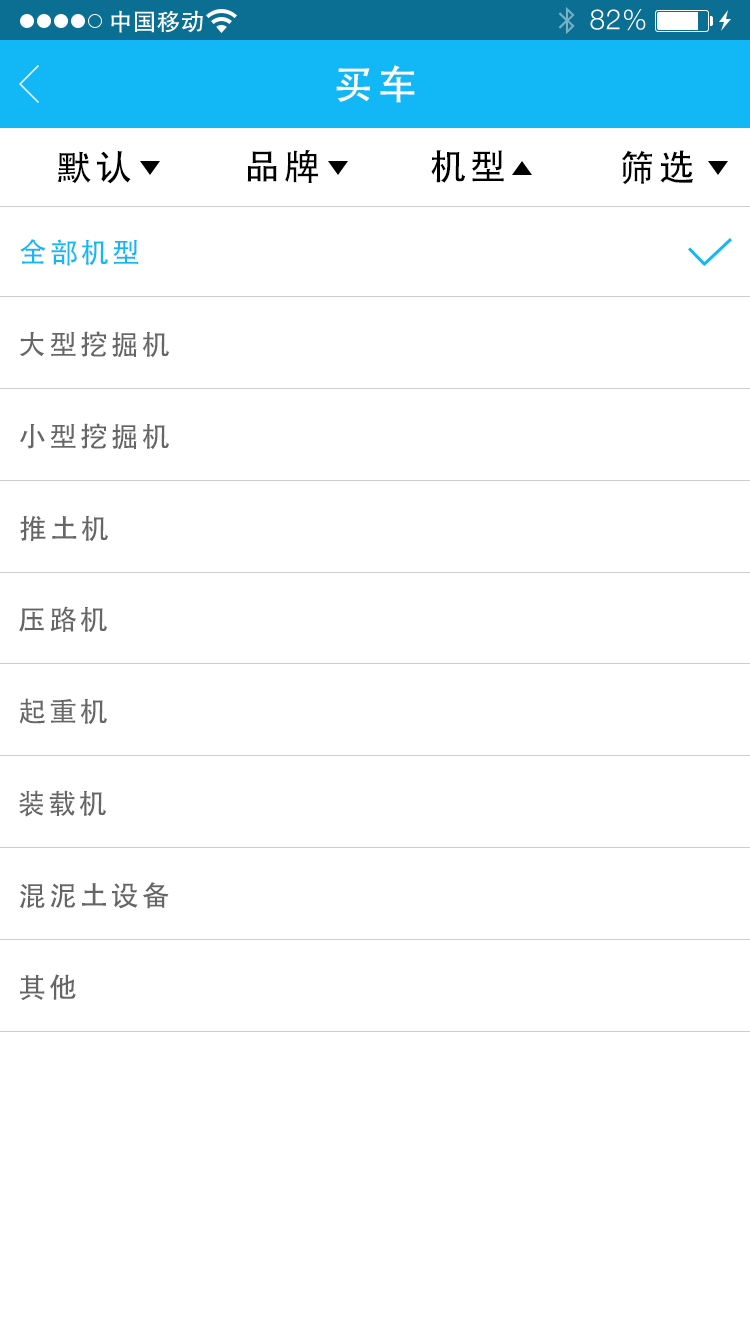
<style>
.page{position:relative;width:750px;height:1334px;background:#ffffff}
.page>*{position:absolute;margin:0}
.t1{font:40px "AdobeHeitiStd-Regular";letter-spacing:0.104em;color:#ffffff}
.t2{font:36px "AdobeHeitiStd-Regular";letter-spacing:0.104em;color:#000000}
.t3{font:28px "AdobeHeitiStd-Regular";letter-spacing:0.104em;color:#12b8f6}
.t4{font:28px "AdobeHeitiStd-Regular";letter-spacing:0.104em;color:#666666}
</style>
<div class="page">
<p class="t1" style="left:336px;top:65px;width:79px;height:38px">买车</p>
<p class="t2" style="left:247px;top:149px;width:71px;height:34px">品牌</p>
<p class="t2" style="left:431px;top:150px;width:73px;height:33px">机型</p>
<p class="t2" style="left:621px;top:150px;width:73px;height:35px">筛选</p>
<p class="t2" style="left:57px;top:151px;width:74px;height:33px">默认</p>
<p class="t3" style="left:20px;top:239px;width:119px;height:27px">全部机型</p>
<p class="t4" style="left:19px;top:331px;width:150px;height:27px">大型挖掘机</p>
<p class="t4" style="left:20px;top:423px;width:149px;height:27px">小型挖掘机</p>
<p class="t4" style="left:20px;top:515px;width:88px;height:27px">推土机</p>
<p class="t4" style="left:19px;top:606px;width:88px;height:27px">压路机</p>
<p class="t4" style="left:19px;top:698px;width:88px;height:27px">起重机</p>
<p class="t4" style="left:19px;top:790px;width:87px;height:27px">装载机</p>
<p class="t4" style="left:20px;top:882px;width:149px;height:27px">混泥土设备</p>
<p class="t4" style="left:20px;top:974px;width:56px;height:27px">其他</p>
</div>
